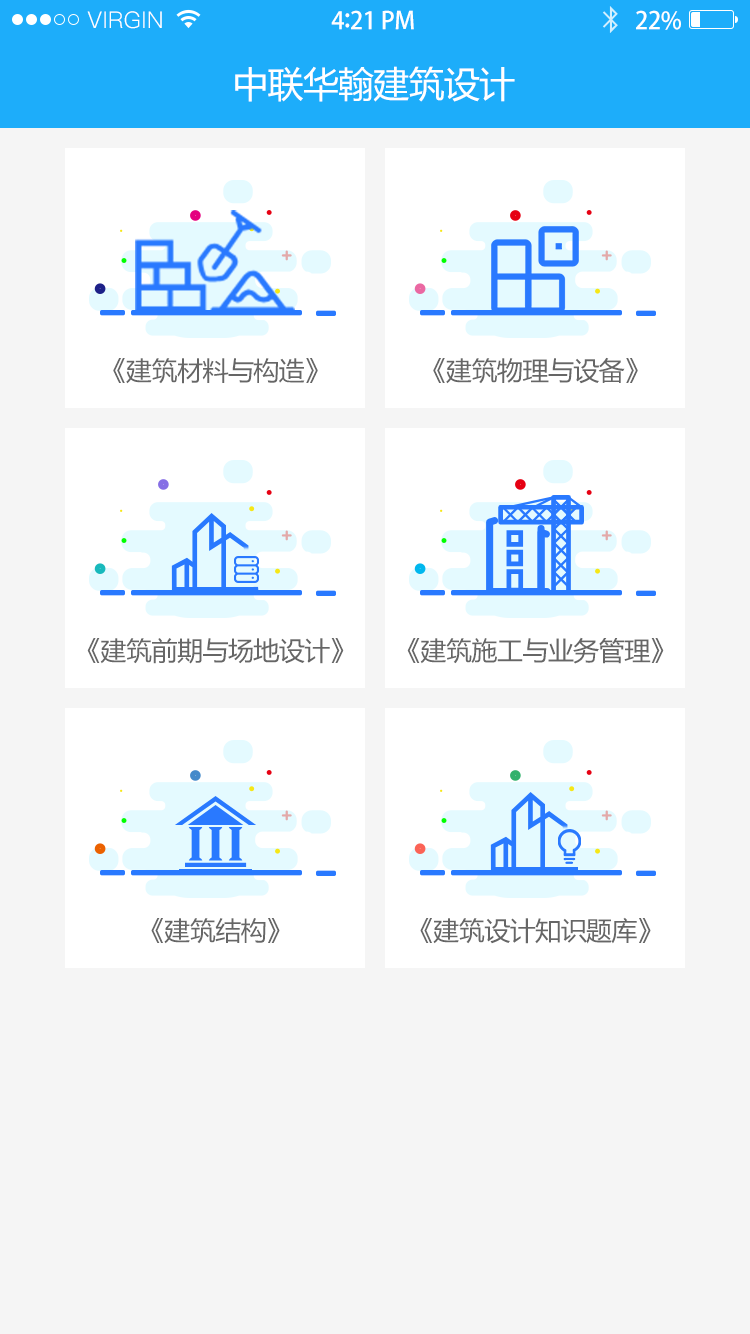
<style>
.page{position:relative;width:750px;height:1334px;background:#f5f5f5}
.page>*{position:absolute;margin:0}
.t1{font:23px "PingFang-SC-Regular";letter-spacing:0.02em;color:#ffffff}
.t2{font:24px "AdobeHeitiStd-Regular";letter-spacing:-0.02em;color:#ffffff}
.t3{font:26px "AdobeHeitiStd-Regular";letter-spacing:-0.02em;color:#ffffff}
.t4{font:36px "MicrosoftYaHei";letter-spacing:-0.02em;color:#ffffff}
.t5{font:26px "MicrosoftYaHei";letter-spacing:-0.02em;color:#666666}
</style>
<div class="page">
<p class="t1" style="left:87px;top:11px;width:75px;height:18px">VIRGIN</p>
<p class="t2" style="left:331px;top:10px;width:83px;height:20px">4<span class="t3">:</span>21 PM</p>
<p class="t2" style="left:636px;top:10px;width:45px;height:20px">22%</p>
<p class="t4" style="left:235px;top:66px;width:280px;height:36px">中联华翰建筑设计</p>
<p class="t5" style="left:113px;top:358px;width:205px;height:26px">《建筑材料与构造》</p>
<p class="t5" style="left:433px;top:357px;width:205px;height:27px">《建筑物理与设备》</p>
<p class="t5" style="left:87px;top:638px;width:257px;height:26px">《建筑前期与场地设计》</p>
<p class="t5" style="left:407px;top:637px;width:257px;height:27px">《建筑施工与业务管理》</p>
<p class="t5" style="left:151px;top:918px;width:129px;height:26px">《建筑结构》</p>
<p class="t5" style="left:420px;top:917px;width:231px;height:27px">《建筑设计知识题库》</p>
</div>
